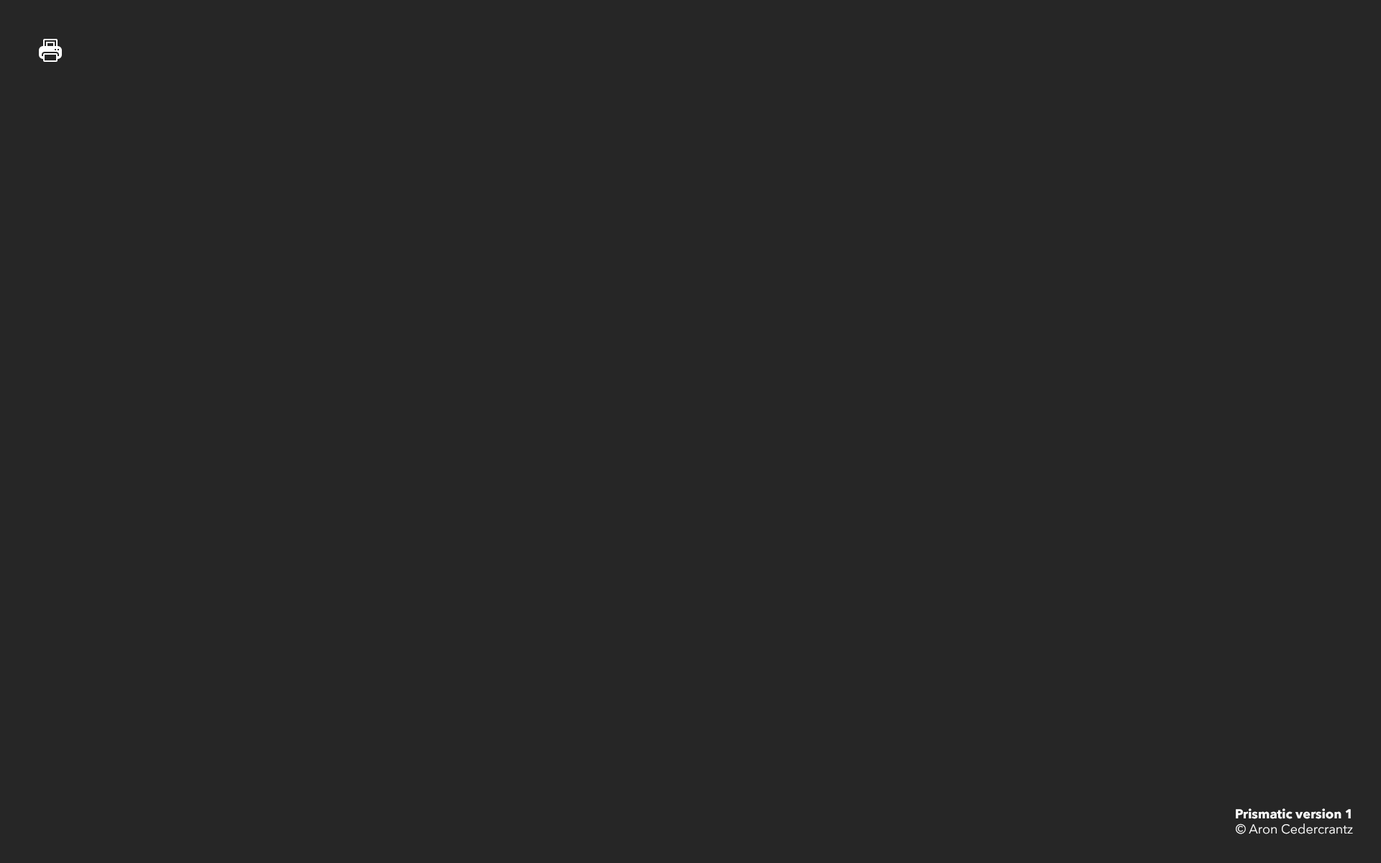
<style>
.page{position:relative;width:1381px;height:863px;background:#262626}
.page>*{position:absolute;margin:0}
.t1{font:12.9px "AvenirNext-Bold";color:#ffffff}
.t2{font:12.9px "AvenirNext-Regular";color:#ffffff}
</style>
<div class="page">
<p class="t1" style="left:1236px;top:809px;width:117px;height:26px;text-align:center">Prismatic version 1<br><span class="t2">© Aron Cedercrantz</span></p>
</div>
